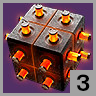
<style>
.page{position:relative;width:96px;height:96px}
.page>*{position:absolute;margin:0}
.t1{font:23.6px "NHaasGroteskDSPro-65Md";color:#000000}
</style>
<div class="page">
<p class="t1" style="left:77px;top:74px;width:13px;height:17px">3</p>
</div>
